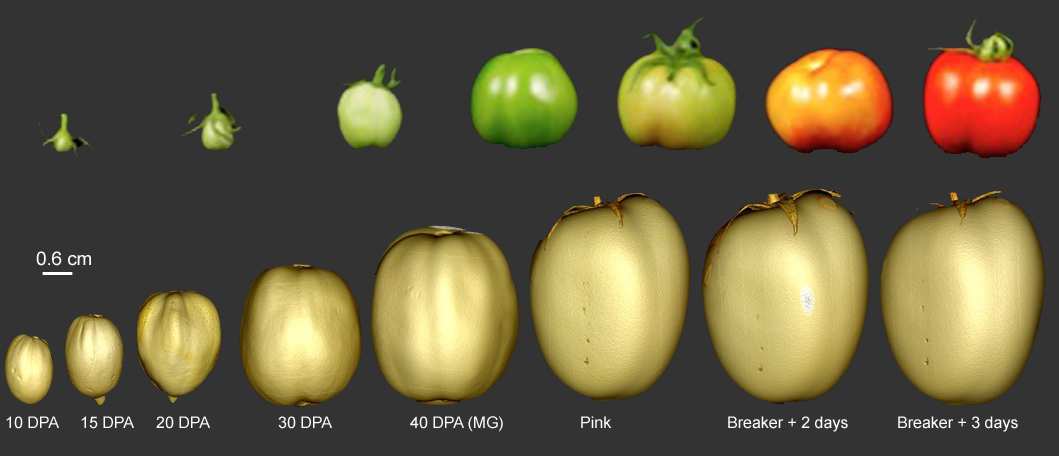
<style>
.page{position:relative;width:1059px;height:456px;background:#333333}
.page>*{position:absolute;margin:0}
.t1{font:18.7px "ArialMT";color:#fdfdfd}
.t2{font:16px "ArialMT";color:#fdfdfd}
</style>
<div class="page">
<p class="t1" style="left:36px;top:251px;width:55px;height:15px">0.6 cm</p>
<p class="t2" style="left:6px;top:416px;width:53px;height:13px">10 DPA</p>
<p class="t2" style="left:81px;top:416px;width:53px;height:13px">15 DPA</p>
<p class="t2" style="left:156px;top:416px;width:54px;height:13px">20 DPA</p>
<p class="t2" style="left:278px;top:416px;width:54px;height:13px">30 DPA</p>
<p class="t2" style="left:410px;top:416px;width:93px;height:16px">40 DPA (MG)</p>
<p class="t2" style="left:581px;top:416px;width:31px;height:12px">Pink</p>
<p class="t2" style="left:728px;top:416px;width:120px;height:16px">Breaker + 2 days</p>
<p class="t2" style="left:898px;top:416px;width:120px;height:16px">Breaker + 3 days</p>
</div>
